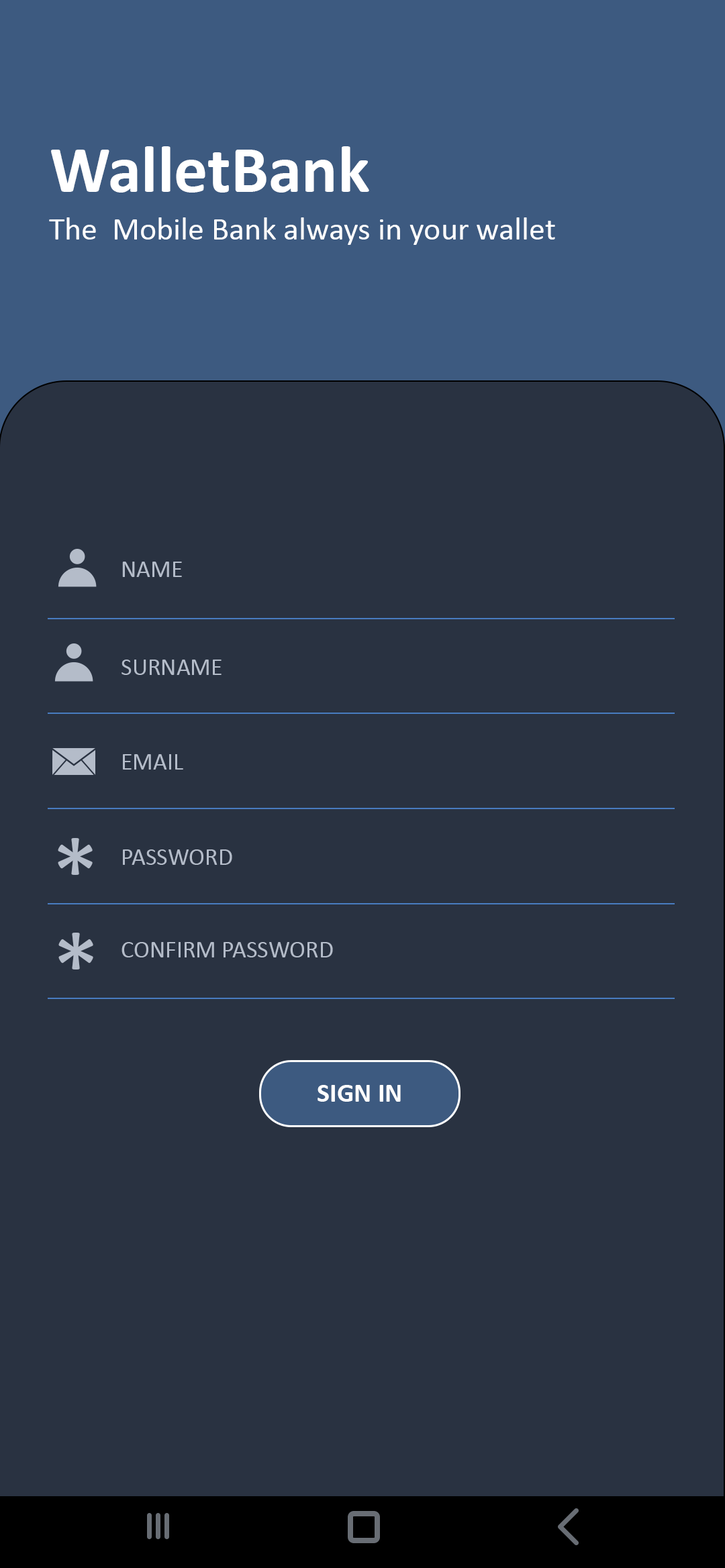
<style>
.page{position:relative;width:725px;height:1568px;background:#293241}
.page>*{position:absolute;margin:0}
.t1{font:67.1px "Calibri-Bold";color:#ffffff}
.t2{font:32.2px "Calibri";color:#ffffff}
.t3{font:24.2px "Calibri";color:#b4bcc9}
.t4{font:100.6px "Calibri";color:#b4bcc9}
.t5{font:26.8px "Calibri-Bold";color:#ffffff}
</style>
<div class="page">
<p class="t1" style="left:51px;top:146px;width:318px;height:47px">WalletBank</p>
<p class="t2" style="left:49px;top:217px;width:506px;height:28px">The  Mobile Bank always in your wallet</p>
<p class="t3" style="left:122px;top:562px;width:60px;height:15px">NAME</p>
<p class="t3" style="left:121px;top:660px;width:100px;height:15px">SURNAME</p>
<p class="t3" style="left:123px;top:754px;width:60px;height:16px">EMAIL</p>
<p class="t4" style="left:58px;top:838px;width:35px;height:37px">*</p>
<p class="t3" style="left:123px;top:849px;width:109px;height:16px">PASSWORD</p>
<p class="t4" style="left:58px;top:933px;width:35px;height:37px">*</p>
<p class="t3" style="left:121px;top:942px;width:212px;height:15px">CONFIRM PASSWORD</p>
<p class="t5" style="left:317px;top:1085px;width:84px;height:17px">SIGN IN</p>
</div>
